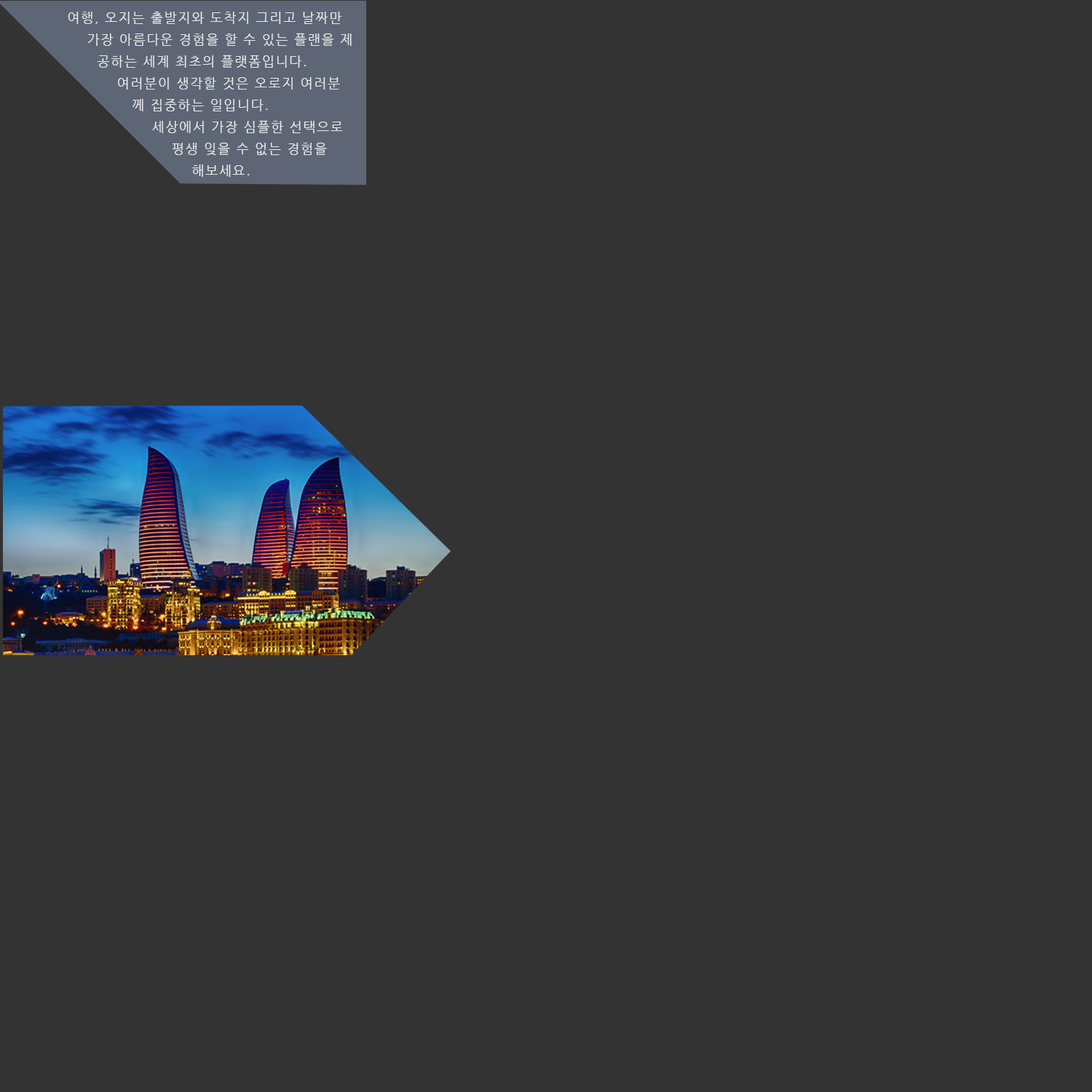
<style>
.page{position:relative;width:1092px;height:1092px;background:#333333}
.page>*{position:absolute;margin:0}
.t1{font:13.1px/21.8px "NanumGothic";letter-spacing:0.1em;color:#eaeaea}
</style>
<div class="page">
<p class="t1" style="left:68px;top:11px;width:284px;height:166px">여행, 오지는 출발지와 도착지 그리고 날짜만<br>    가장 아름다운 경험을 할 수 있는 플랜을 제<br>      공하는 세계 최초의 플랫폼입니다.<br>          여러분이 생각할 것은 오로지 여러분<br>             께 집중하는 일입니다.<br>                 세상에서 가장 심플한 선택으로<br>                     평생 잊을 수 없는 경험을    <br>                         해보세요.</p>
</div>
